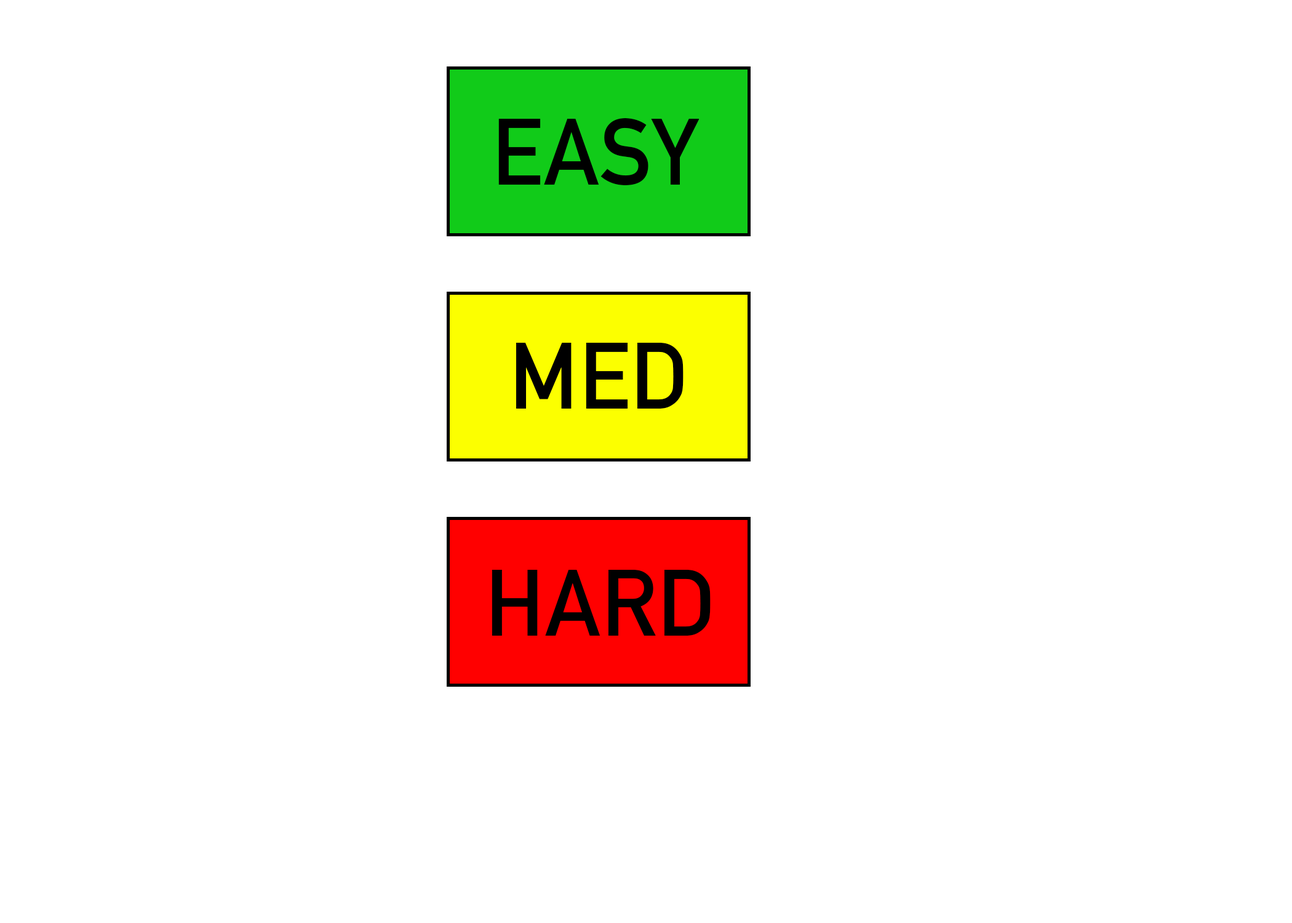
<style>
.page{position:relative;width:1292px;height:923px;background:#ffffff}
.page>*{position:absolute;margin:0}
.t1{font:92.3px "DINAlternate-Bold";color:#000000}
</style>
<div class="page">
<p class="t1" style="left:498px;top:118px;width:201px;height:67px">EASY</p>
<p class="t1" style="left:516px;top:343px;width:168px;height:66px">MED</p>
<p class="t1" style="left:492px;top:570px;width:219px;height:66px">HARD</p>
</div>
